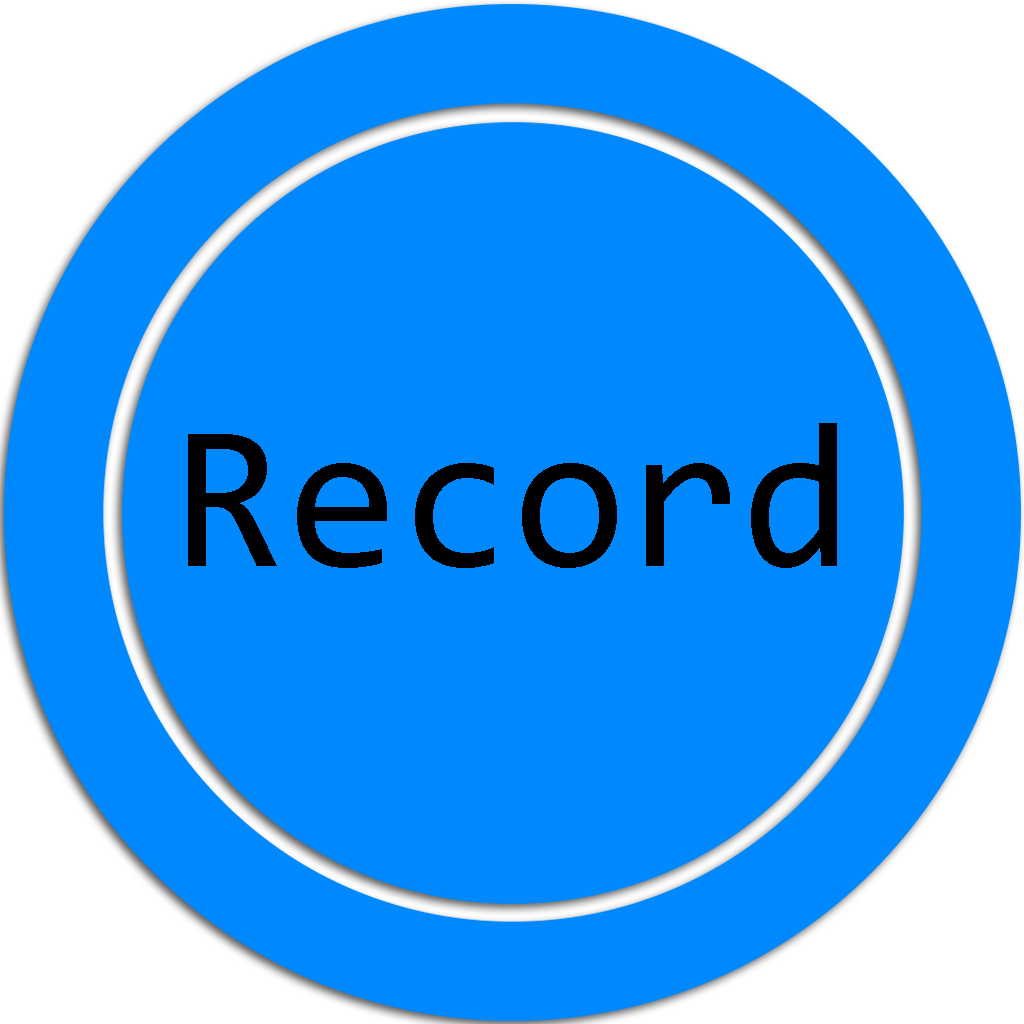
<style>
.page{position:relative;width:1024px;height:1024px;background:#0088ff}
.page>*{position:absolute;margin:0}
.t1{font:206.9px "Consolas";color:#000000}
</style>
<div class="page">
<p class="t1" style="left:188px;top:423px;width:649px;height:145px">Record</p>
</div>
